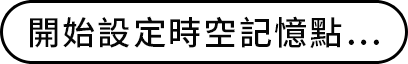
<style>
.page{position:relative;width:408px;height:64px;background:#ffffff}
.page>*{position:absolute;margin:0}
.t1{font:33.3px "NotoSansCJKtc-Medium";letter-spacing:0.06em;color:#060606}
</style>
<div class="page">
<p class="t1" style="left:30px;top:16px;width:349px;height:33px">開始設定時空記憶點…</p>
</div>
